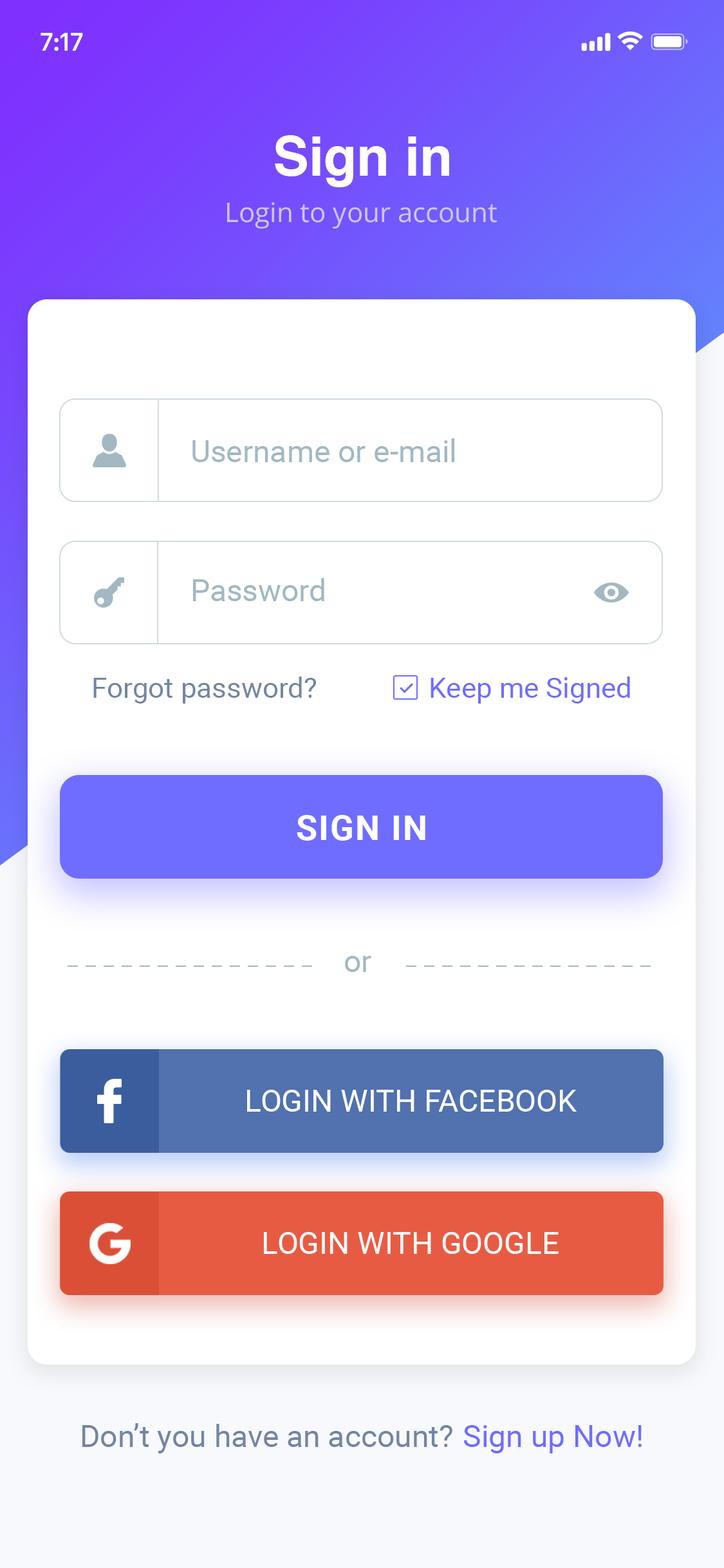
<style>
.page{position:relative;width:724px;height:1568px;background:#ffffff}
.page>*{position:absolute;margin:0}
.t1{font:54.1px "Helvetica-Bold";color:#ffffff}
.t2{font:27px "OpenSans";color:#cdc5ff}
.t3{font:30.9px "Roboto-Regular";color:#a1b7c2}
.t4{font:28.3px "Roboto-Regular";color:#7083a4}
.t5{font:28.3px "Roboto-Regular";color:#6f6dff}
.t6{font:34.8px "Roboto-Bold";letter-spacing:0.04em;color:#ffffff}
.t7{font:30.9px "Roboto-Regular";color:#ffffff}
.t8{font:30.9px "Roboto-Regular";color:#7083a4}
.t9{font:30.9px "Roboto-Regular";color:#6f6dff}
</style>
<div class="page">
<p class="t1" style="left:275px;top:135px;width:174px;height:52px">Sign in</p>
<p class="t2" style="left:227px;top:202px;width:270px;height:27px">Login to your account</p>
<p class="t3" style="left:192px;top:438px;width:262px;height:24px">Username or e-mail</p>
<p class="t3" style="left:193px;top:578px;width:131px;height:23px">Password</p>
<p class="t4" style="left:93px;top:677px;width:223px;height:27px">Forgot password?</p>
<p class="t5" style="left:431px;top:677px;width:199px;height:27px">Keep me Signed</p>
<p class="t6" style="left:297px;top:815px;width:128px;height:26px">SIGN IN</p>
<p class="t3" style="left:345px;top:956px;width:26px;height:16px">or</p>
<p class="t7" style="left:247px;top:1090px;width:330px;height:22px">LOGIN WITH FACEBOOK</p>
<p class="t7" style="left:264px;top:1232px;width:295px;height:22px">LOGIN WITH GOOGLE</p>
<p class="t8" style="left:82px;top:1423px;width:371px;height:30px">Don’t you have an account?</p>
<p class="t9" style="left:463px;top:1425px;width:179px;height:28px">Sign up Now!</p>
</div>
